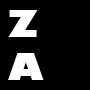
<style>
.page{position:relative;width:90px;height:90px;background:#000000}
.page>*{position:absolute;margin:0}
.t1{font:36.1px "GillSans-UltraBold";color:#ffffff}
</style>
<div class="page">
<p class="t1" style="left:8px;top:10px;width:36px;height:70px">Z<br>A</p>
</div>
